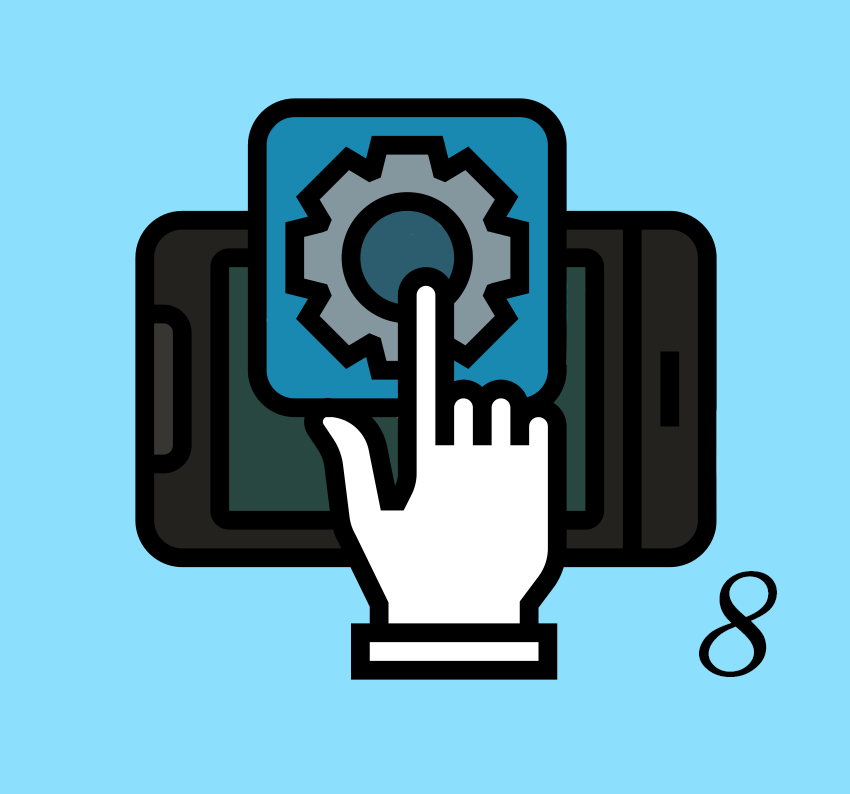
<style>
.page{position:relative;width:850px;height:794px;background:#8cdffd}
.page>*{position:absolute;margin:0}
.t1{font:149.9px "CenturySchoolbook-Italic";color:#000000}
</style>
<div class="page">
<p class="t1" style="left:699px;top:571px;width:78px;height:106px">8</p>
</div>
